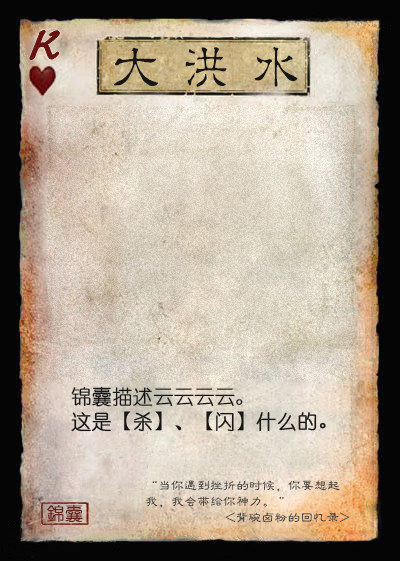
<style>
.page{position:relative;width:400px;height:561px}
.page>*{position:absolute;margin:0}
.t1{font:50px "Jxixinkai";color:#661213;font-weight:bold;font-style:italic}
.t2{font:50px "¾­µä·±½ÇÁ¥ Regular";letter-spacing:0.4em;color:#161616}
.t3{font:20px "YouYuan";color:#161616;font-weight:bold}
.t4{font:20px "DFPWaWaW5";color:#161616;font-weight:bold}
.t5{font:13px "FZLBJW--GB1-0";color:#464646}
.t6{font:18px "YouYuan";color:#662219;font-weight:bold}
</style>
<div class="page">
<p class="t1" style="left:30px;top:30px;width:30px;height:30px">K</p>
<p class="t2" style="left:114px;top:47px;width:184px;height:40px">大洪水</p>
<p class="t3" style="left:71px;top:386px;width:172px;height:21px">锦囊描述云云云云。</p>
<p class="t3" style="left:71px;top:411px;width:255px;height:21px">这是<span class="t4">【</span>杀<span class="t4">】</span>、<span class="t4">【</span>闪<span class="t4">】</span>什么的<span class="t4">。</span></p>
<p class="t5" style="left:152px;top:480px;width:188px;height:12px">“当你遇到挫折的时候，你要想起</p>
<p class="t5" style="left:146px;top:496px;width:138px;height:12px">我，我会带给你神力。 ”</p>
<p class="t6" style="left:47px;top:504px;width:36px;height:18px">錦囊</p>
<p class="t5" style="left:225px;top:512px;width:125px;height:11px">&lt;背碗卤粉的回忆录&gt;</p>
</div>
